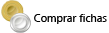
<style>
.page{position:relative;width:109px;height:33px;background:#ffffff}
.page>*{position:absolute;margin:0}
.t1{font:11px "SegoeUI";color:#000000}
</style>
<div class="page">
<p class="t1" style="left:34px;top:14px;width:73px;height:10px">Comprar fichas</p>
</div>
